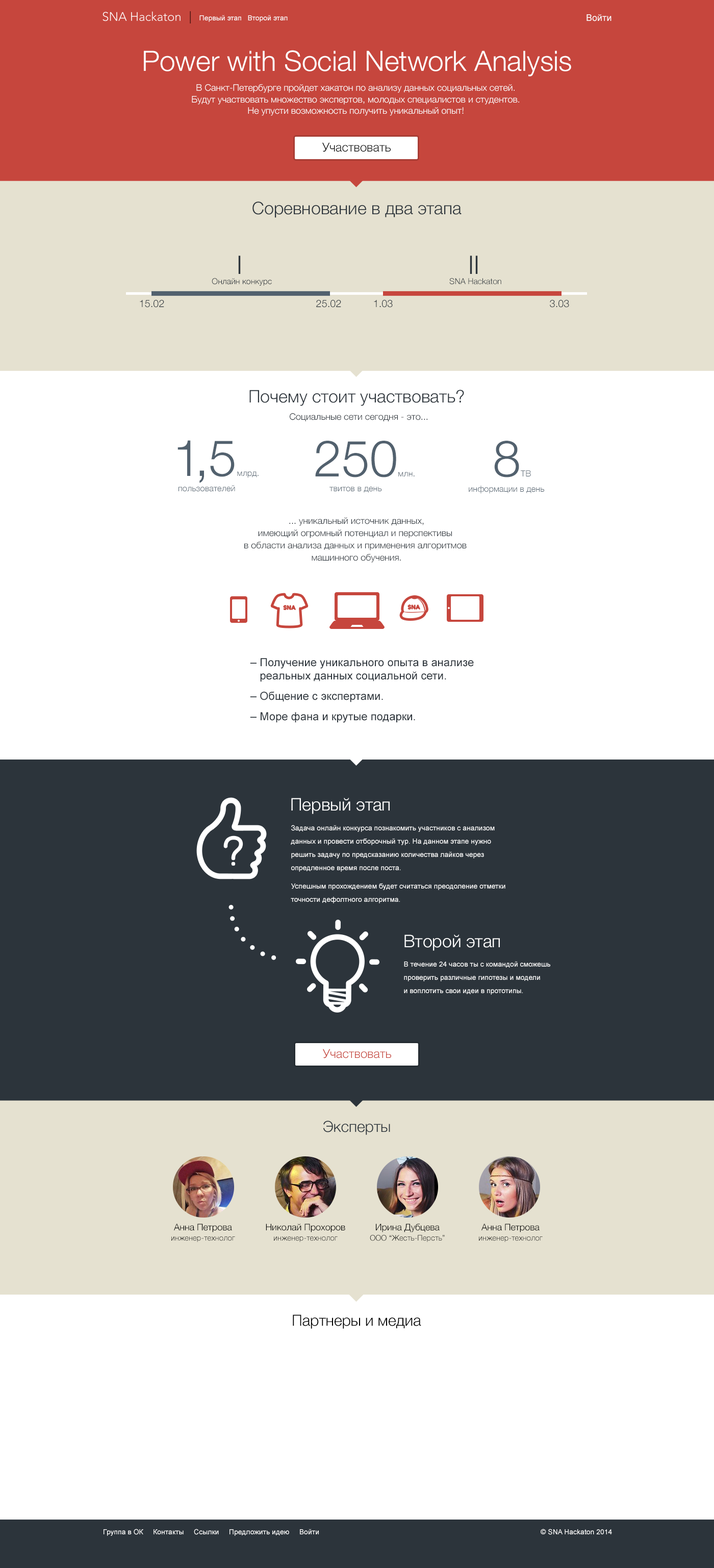
<style>
.page{position:relative;width:714px;height:1568px;background:#ffffff}
.page>*{position:absolute;margin:0}
.t1{font:7.1px "ArialMT";color:#ffffff}
.t2{font:7.1px "Avenir-Light";color:#000000}
.t3{font:12.2px "Avenir-Light";color:#000000}
.t4{font:9.2px "ArialMT";color:#fefefe}
.t5{font:28.1px "HelveticaNeue-Light";color:#ffffff}
.t6{font:9.2px/11.3px "HelveticaNeue-Light";color:#ffffff}
.t7{font:12.2px "HelveticaNeue-Light";color:#000000}
.t8{font:17.3px "HelveticaNeue-Light";color:#2c343b}
.t9{font:25.5px "HelveticaNeue-Light";color:#2c343b}
.t10{font:8.2px "HelveticaNeue-Light";color:#2c343b}
.t11{font:10.2px "HelveticaNeue-Light";color:#2c343b}
.t12{font:9.2px "HelveticaNeue-Light";color:#2c343b}
.t13{font:8.4px "HelveticaNeue-Light";color:#52616e}
.t14{font:50.6px "HelveticaNeue-Light";letter-spacing:-0.12em;color:#52616e}
.t15{font:50.6px "HelveticaNeue-Light";color:#52616e}
.t16{font:8.5px "HelveticaNeue-Light";color:#52616e}
.t17{font:9.2px/12.3px "HelveticaNeue-Light";color:#2c343b}
.t18{font:5.7px "Avenir-Roman";letter-spacing:0.05em;color:#c6463d;scale:0.96 1}
.t19{font:11.2px/15.3px "ArialMT";color:#2c343b}
.t20{font:11.2px/13.3px "ArialMT";color:#2c343b}
.t21{font:11.2px/20.4px "ArialMT";color:#2c343b}
.t22{font:17.3px "HelveticaNeue-Light";color:#ffffff}
.t23{font:7.1px/13.3px "ArialMT";color:#ffffff}
.t24{font:7.1px/18.4px "ArialMT";color:#ffffff}
.t25{font:12.2px "HelveticaNeue-Light";color:#c6463d}
.t26{font:15.3px "HelveticaNeue-Light";color:#2c343b}
.t27{font:7.7px/10.2px "HelveticaNeue-Light";color:#000000}
.t28{font:9.2px/10.2px "HelveticaNeue-Light";color:#000000}
.t29{font:15.3px "HelveticaNeue-Light";color:#000000}
</style>
<div class="page">
<p class="t1" style="left:190px;top:11px;width:98px;height:12px"><span class="t2"> </span><span class="t3">|    </span>Первый этап   Второй этап</p>
<p class="t4" style="left:587px;top:14px;width:25px;height:7px">Войти</p>
<p class="t5" style="left:144px;top:50px;width:427px;height:27px">Power with Soсial Network Analysis</p>
<p class="t6" style="left:192px;top:84px;width:327px;height:32px;text-align:center">В Санкт-Петербурге пройдет хакатон по анализу данных социальных сетей. <br>Будут участвовать множество экспертов, молодых специалистов и студентов. <br>Не упусти возможность получить уникальный опыт!</p>
<p class="t7" style="left:322px;top:142px;width:69px;height:10px">Участвовать</p>
<p class="t8" style="left:252px;top:201px;width:210px;height:17px">Соревнование в два этапа</p>
<p class="t9" style="left:238px;top:256px;width:3px;height:18px">I</p>
<p class="t9" style="left:470px;top:256px;width:8px;height:18px">II</p>
<p class="t10" style="left:212px;top:278px;width:60px;height:8px">Онлайн конкурс</p>
<p class="t10" style="left:449px;top:278px;width:52px;height:7px">SNA Hackaton</p>
<p class="t11" style="left:140px;top:300px;width:24px;height:8px">15.02</p>
<p class="t11" style="left:316px;top:300px;width:25px;height:8px">25.02</p>
<p class="t11" style="left:374px;top:300px;width:19px;height:8px">1.03</p>
<p class="t11" style="left:550px;top:300px;width:19px;height:8px">3.03</p>
<p class="t8" style="left:249px;top:390px;width:215px;height:16px">Почему стоит участвовать?</p>
<p class="t12" style="left:290px;top:413px;width:137px;height:8px">Социальные сети сегодня - это...</p>
<p class="t13" style="left:178px;top:440px;width:81px;height:43px"><span class="t14">1</span><span class="t15">,5</span>млрд.</p>
<p class="t13" style="left:315px;top:441px;width:100px;height:36px"><span class="t15">250</span>млн.</p>
<p class="t13" style="left:494px;top:441px;width:37px;height:36px"><span class="t15">8</span>TB</p>
<p class="t13" style="left:179px;top:485px;width:56px;height:7px">пользователей</p>
<p class="t16" style="left:469px;top:486px;width:75px;height:8px">информации в день</p>
<p class="t13" style="left:330px;top:487px;width:52px;height:6px">твитов в день</p>
<p class="t17" style="left:244px;top:517px;width:223px;height:46px;text-align:center">... уникальный источник данных,<br>имеющий огромный потенциал и перспективы <br>в области анализа данных и применения алгоритмов <br>машинного обучения.</p>
<p class="t18" style="left:284px;top:605px;width:11px;height:5px">SNA</p>
<p class="t18" style="left:408px;top:605px;width:12px;height:4px">SNA</p>
<p class="t19" style="left:250px;top:658px;width:224px;height:65px">– Получение уникального опыта в анализе <br><span class="t20">   реальных данных социальной сети. <br></span><span class="t21">– О</span>бщение с экспертами.<br><span class="t21">– М</span>оре фана и крутые подарки.</p>
<p class="t22" style="left:291px;top:798px;width:99px;height:16px">Первый этап</p>
<p class="t23" style="left:291px;top:825px;width:214px;height:78px">Задача онлайн конкурса познакомить участников с анализом данных и провести отборочный тур. На данном этапе нужно решить задачу по предсказанию количества лайков через опредленное время после поста. <br><span class="t24">У</span>спешным прохождением будет считаться преодоление отметки точности дефолтного алгоритма.</p>
<p class="t22" style="left:404px;top:934px;width:96px;height:17px">Второй этап</p>
<p class="t23" style="left:404px;top:961px;width:146px;height:34px">В течение 24 часов ты с командой сможешь <br>проверить различные гипотезы и модели <br>и воплотить свои идеи в прототипы.</p>
<p class="t25" style="left:322px;top:1049px;width:69px;height:9px">Участвовать</p>
<p class="t26" style="left:323px;top:1121px;width:67px;height:14px">Эксперты</p>
<p class="t27" style="left:171px;top:1224px;width:64px;height:18px;text-align:center"><span class="t28">Анна Петрова<br></span>инженер-технолог</p>
<p class="t28" style="left:266px;top:1224px;width:79px;height:18px;text-align:center">Николай Прохоров<br><span class="t27">инженер-технолог</span></p>
<p class="t27" style="left:370px;top:1224px;width:75px;height:18px;text-align:center"><span class="t28">Ирина Дубцева<br></span>ООО “Жесть-Персть”</p>
<p class="t27" style="left:479px;top:1224px;width:64px;height:18px;text-align:center"><span class="t28">Анна Петрова<br></span>инженер-технолог</p>
<p class="t29" style="left:293px;top:1314px;width:128px;height:15px">Партнеры и медиа</p>
<p class="t1" style="left:104px;top:1529px;width:215px;height:7px">Группа в ОК     Контакты     Ссылки     Предложить идею     Войти</p>
<p class="t1" style="left:541px;top:1529px;width:71px;height:6px">© SNA Hackaton 2014</p>
</div>
